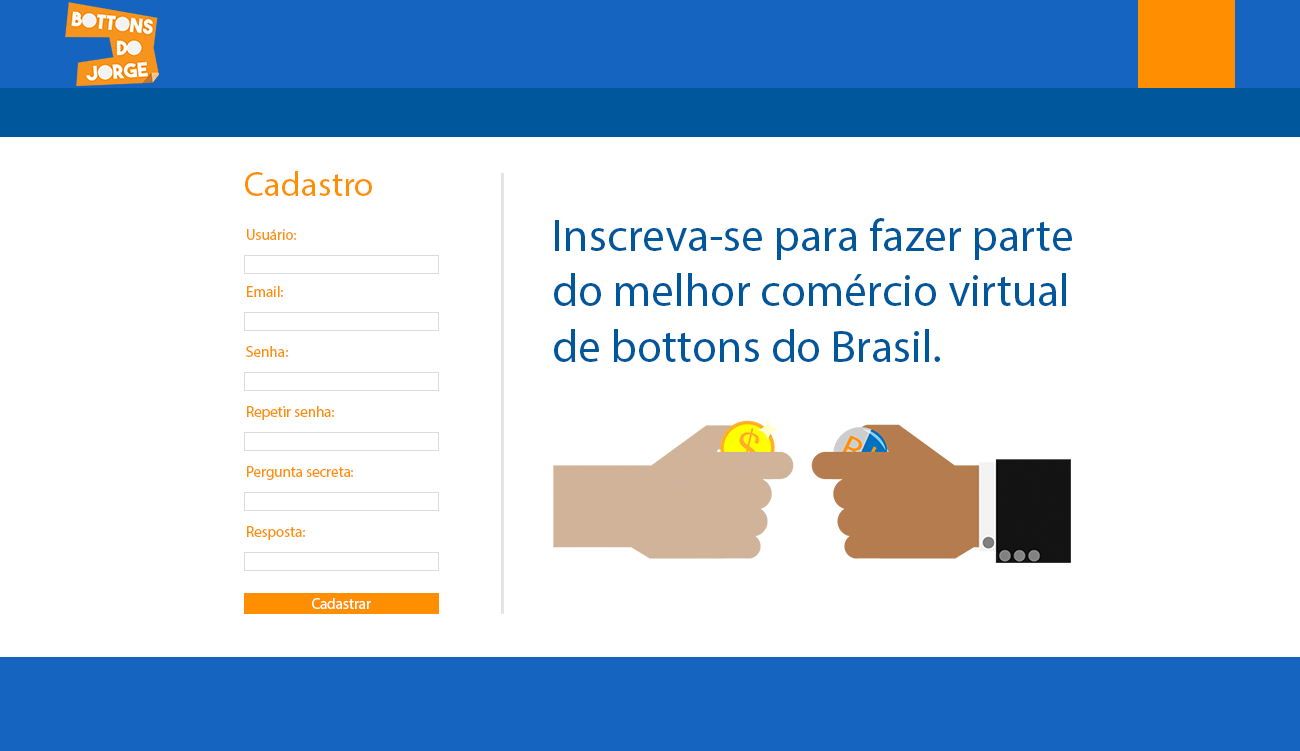
<style>
.page{position:relative;width:1300px;height:751px;background:#ffffff}
.page>*{position:absolute;margin:0}
.t1{font:35px "MyriadPro-Regular";color:#ff8f00}
.t2{font:45.9px "MyriadPro-Regular";color:#01579b}
.t3{font:15px "MyriadPro-Regular";color:#ff8f00}
.t4{font:15px "MyriadPro-Regular";color:#ffffff}
</style>
<div class="page">
<p class="t1" style="left:245px;top:171px;width:127px;height:25px">Cadastro</p>
<p class="t2" style="left:554px;top:218px;width:518px;height:144px">Inscreva-se para fazer parte<br>do melhor comércio virtual<br>de bottons do Brasil.</p>
<p class="t3" style="left:247px;top:229px;width:49px;height:11px">Usuário:</p>
<p class="t3" style="left:247px;top:286px;width:36px;height:11px">Email:</p>
<p class="t3" style="left:246px;top:346px;width:42px;height:11px">Senha:</p>
<p class="t3" style="left:247px;top:406px;width:87px;height:14px">Repetir senha:</p>
<p class="t3" style="left:247px;top:466px;width:106px;height:14px">Pergunta secreta:</p>
<p class="t3" style="left:247px;top:526px;width:58px;height:14px">Resposta:</p>
<p class="t4" style="left:312px;top:598px;width:59px;height:11px">Cadastrar</p>
</div>
